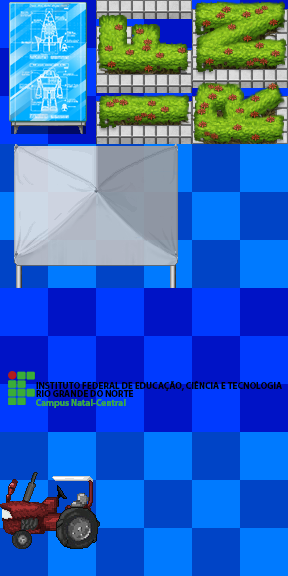
<style>
.page{position:relative;width:288px;height:576px}
.page>*{position:absolute;margin:0}
.t1{font:9.2px "MyriadPro-Bold";color:#000000}
.t2{font:9.2px "MyriadPro-Bold";color:#3aad37}
</style>
<div class="page">
<p class="t1" style="left:36px;top:381px;width:246px;height:10px">INSTITUTO FEDERAL DE EDUCAÇÃO, CIÊNCIA E TECNOLOGIA</p>
<p class="t1" style="left:36px;top:390px;width:98px;height:7px">RIO GRANDE DO NORTE</p>
<p class="t2" style="left:36px;top:399px;width:90px;height:9px">Campus Natal-Central</p>
</div>
